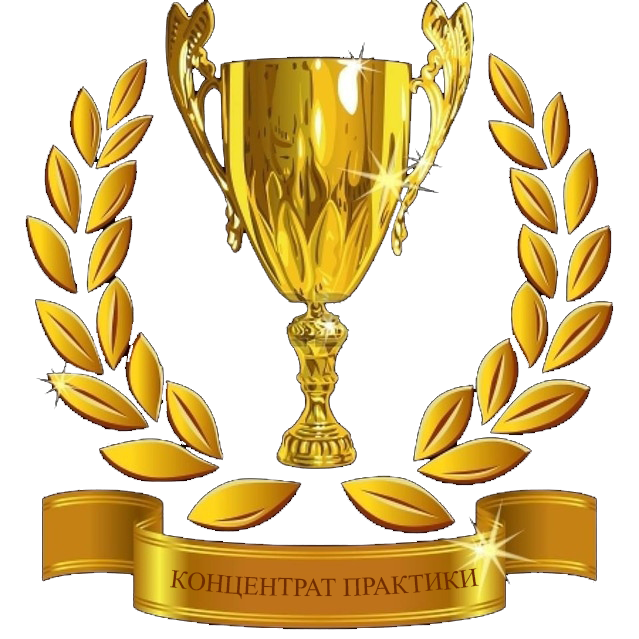
<style>
.page{position:relative;width:639px;height:639px;background:#ffffff}
.page>*{position:absolute;margin:0}
.t1{font:26px "TimesNewRomanPSMT";color:#712c02}
.t2{font:14px "TimesNewRomanPSMT";color:#712c02}
</style>
<div class="page">
<p class="t1" style="left:170px;top:568px;width:309px;height:32px">КОНЦЕНТРАТ ПРАКТИКИ<br><span class="t2">ПРАКТИКИ</span></p>
</div>
